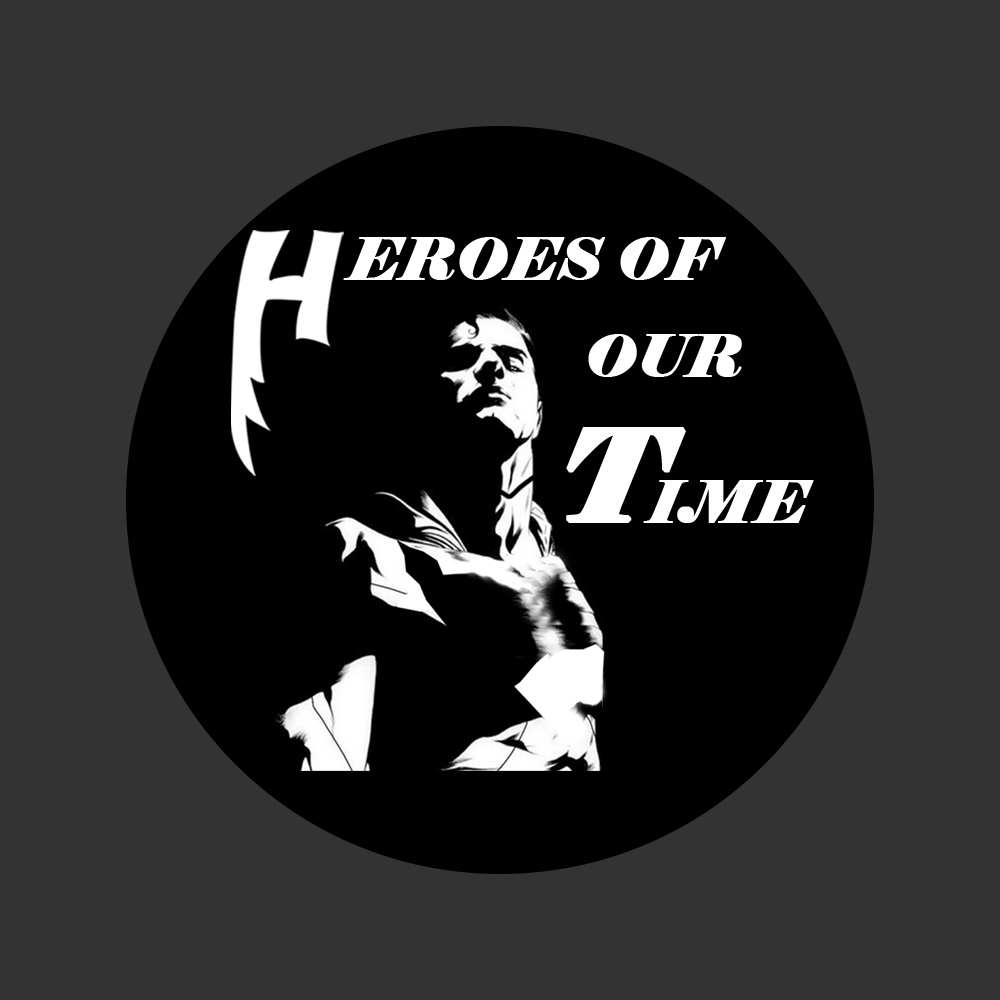
<style>
.page{position:relative;width:1000px;height:1000px;background:#333333}
.page>*{position:absolute;margin:0}
.t1{font:57.8px "Elephant-Italic";color:#ffffff;font-weight:bold}
.t2{font:122.7px "Elephant-Italic";color:#ffffff;font-weight:bold}
</style>
<div class="page">
<p class="t1" style="left:343px;top:237px;width:383px;height:43px">EROES OF</p>
<p class="t1" style="left:588px;top:334px;width:154px;height:43px">OUR</p>
<p class="t2" style="left:566px;top:427px;width:120px;height:96px">T</p>
<p class="t1" style="left:643px;top:480px;width:171px;height:43px">IME</p>
</div>
